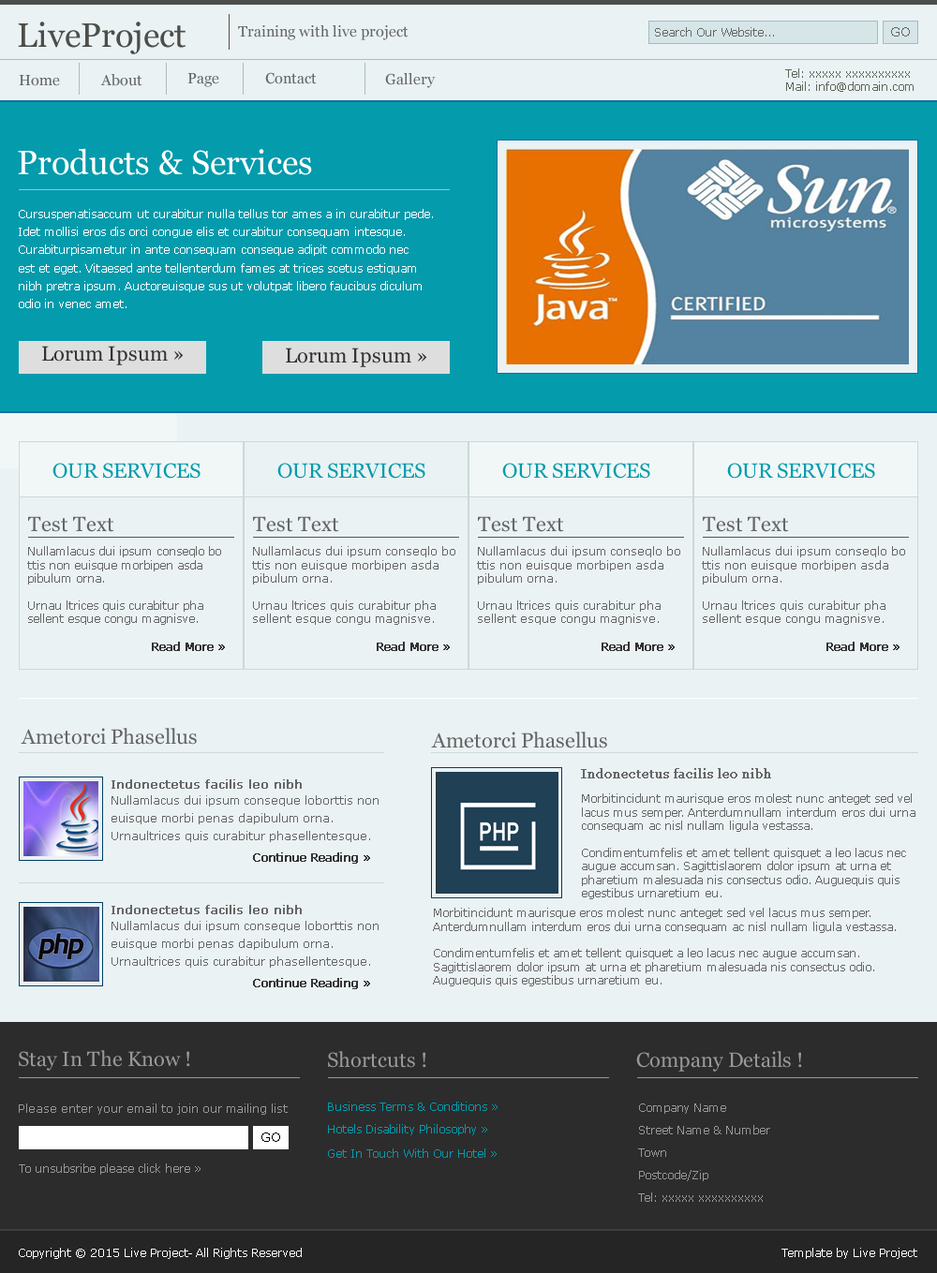
<style>
.page{position:relative;width:937px;height:1273px;background:#eaf2f4}
.page>*{position:absolute;margin:0}
.t1{font:33.7px "Georgia";color:#4d4e49}
.t2{font:15px "Georgia";color:#666666}
.t3{font:11.2px "Verdana";color:#666666}
.t4{font:13.1px "Verdana";color:#666666}
.t5{font:11.2px/13.5px "Verdana";color:#5d655a}
.t6{font:11.2px/18px "Verdana";color:#ffffff}
.t7{font:20.6px "Georgia";color:#333333}
.t8{font:20.6px "Georgia";color:#049bac}
.t9{font:20.6px "Georgia";color:#666666}
.t10{font:11.2px/13.5px "Verdana";color:#666666}
.t11{font:11.2px "Verdana";color:#333333;font-weight:bold}
.t12{font:12.2px "Georgia";color:#666666;font-weight:bold}
.t13{font:11.2px "Verdana";color:#666666;font-weight:bold}
.t14{font:11.2px/18px "Verdana";color:#666666}
.t15{font:20.6px "Georgia";color:#98989a}
.t16{font:11.2px "Verdana";color:#98989a}
.t17{font:11.2px "Verdana";color:#049bac}
.t18{font:11.2px/22.5px "Verdana";color:#98989a}
.t19{font:13.1px "Verdana";color:#000000}
.t20{font:11.2px "Verdana";color:#ffffff}
</style>
<div class="page">
<p class="t1" style="left:18px;top:22px;width:167px;height:32px">LiveProject</p>
<p class="t2" style="left:238px;top:25px;width:170px;height:15px">Training with live project</p>
<p class="t3" style="left:655px;top:27px;width:119px;height:10px">Search Our Website...</p>
<p class="t4" style="left:891px;top:27px;width:19px;height:10px">GO</p>
<p class="t2" style="left:19px;top:75px;width:41px;height:11px">Home</p>
<p class="t2" style="left:100px;top:74px;width:42px;height:12px">About</p>
<p class="t2" style="left:187px;top:73px;width:32px;height:14px">Page</p>
<p class="t2" style="left:265px;top:72px;width:52px;height:12px">Contact</p>
<p class="t2" style="left:385px;top:73px;width:51px;height:15px">Gallery</p>
<p class="t5" style="left:785px;top:68px;width:128px;height:24px">Tel: xxxxx xxxxxxxxxx<br>Mail: info@domain.com</p>
<p class="t6" style="left:19px;top:209px;width:414px;height:99px">Cursuspenatisaccum ut curabitur nulla tellus tor ames a in curabitur pede. <br>Idet mollisi eros dis orci congue elis et curabitur consequam intesque. <br>Curabiturpisametur in ante consequam conseque adipit commodo nec <br>est et eget. Vitaesed ante tellenterdum fames at trices scetus estiquam <br>nibh pretra ipsum. Auctoreuisque sus ut volutpat libero faucibus diculum <br>odio in venec amet.</p>
<p class="t7" style="left:42px;top:346px;width:141px;height:19px">Lorum Ipsum »</p>
<p class="t7" style="left:286px;top:348px;width:140px;height:19px">Lorum Ipsum »</p>
<p class="t8" style="left:52px;top:463px;width:148px;height:16px">OUR SERVICES</p>
<p class="t8" style="left:277px;top:463px;width:148px;height:16px">OUR SERVICES</p>
<p class="t8" style="left:502px;top:463px;width:148px;height:16px">OUR SERVICES</p>
<p class="t8" style="left:727px;top:463px;width:148px;height:16px">OUR SERVICES</p>
<p class="t9" style="left:28px;top:516px;width:86px;height:16px">Test Text</p>
<p class="t9" style="left:253px;top:516px;width:86px;height:16px">Test Text</p>
<p class="t9" style="left:478px;top:516px;width:86px;height:16px">Test Text</p>
<p class="t9" style="left:703px;top:516px;width:86px;height:16px">Test Text</p>
<p class="t10" style="left:27px;top:546px;width:194px;height:79px">Nullamlacus dui ipsum conseqlo bo ttis non euisque morbipen asda pibulum orna.<br><br>Urnau ltrices quis curabitur pha sellent esque congu magnisve.</p>
<p class="t10" style="left:252px;top:546px;width:203px;height:79px">Nullamlacus dui ipsum conseqlo bo ttis non euisque morbipen asda pibulum orna.<br><br>Urnau ltrices quis curabitur pha sellent esque congu magnisve.</p>
<p class="t10" style="left:477px;top:546px;width:203px;height:79px">Nullamlacus dui ipsum conseqlo bo ttis non euisque morbipen asda pibulum orna.<br><br>Urnau ltrices quis curabitur pha sellent esque congu magnisve.</p>
<p class="t10" style="left:702px;top:546px;width:203px;height:79px">Nullamlacus dui ipsum conseqlo bo ttis non euisque morbipen asda pibulum orna.<br><br>Urnau ltrices quis curabitur pha sellent esque congu magnisve.</p>
<p class="t11" style="left:152px;top:642px;width:73px;height:9px">Read More »</p>
<p class="t11" style="left:377px;top:642px;width:73px;height:9px">Read More »</p>
<p class="t11" style="left:601px;top:642px;width:73px;height:9px">Read More »</p>
<p class="t11" style="left:826px;top:642px;width:73px;height:9px">Read More »</p>
<p class="t9" style="left:21px;top:728px;width:176px;height:17px">Ametorci Phasellus</p>
<p class="t9" style="left:431px;top:732px;width:176px;height:16px">Ametorci Phasellus</p>
<p class="t12" style="left:581px;top:768px;width:190px;height:10px">Indonectetus facilis leo nibh</p>
<p class="t13" style="left:111px;top:779px;width:191px;height:10px">Indonectetus facilis leo nibh</p>
<p class="t14" style="left:111px;top:795px;width:267px;height:47px">Nullamlacus dui ipsum conseque loborttis non <br>euisque morbi penas dapibulum orna. <br>Urnaultrices quis curabitur phasellentesque.</p>
<p class="t10" style="left:582px;top:793px;width:333px;height:106px">Morbitincidunt maurisque eros molest nunc anteget sed vel lacus mus semper. Anterdumnullam interdum eros dui urna consequam ac nisl nullam ligula vestassa.<br><br>Condimentumfelis et amet tellent quisquet a leo lacus nec augue accumsan. Sagittislaorem dolor ipsum at urna et pharetium malesuada nis consectus odio. Auguequis quis egestibus urnaretium eu.</p>
<p class="t11" style="left:253px;top:852px;width:117px;height:12px">Continue Reading »</p>
<p class="t13" style="left:111px;top:905px;width:191px;height:9px">Indonectetus facilis leo nibh</p>
<p class="t10" style="left:433px;top:908px;width:462px;height:78px">Morbitincidunt maurisque eros molest nunc anteget sed vel lacus mus semper. Anterdumnullam interdum eros dui urna consequam ac nisl nullam ligula vestassa.<br><br>Condimentumfelis et amet tellent quisquet a leo lacus nec augue accumsan. Sagittislaorem dolor ipsum at urna et pharetium malesuada nis consectus odio. Auguequis quis egestibus urnaretium eu.</p>
<p class="t14" style="left:111px;top:921px;width:267px;height:47px">Nullamlacus dui ipsum conseque loborttis non <br>euisque morbi penas dapibulum orna. <br>Urnaultrices quis curabitur phasellentesque.</p>
<p class="t11" style="left:253px;top:978px;width:117px;height:11px">Continue Reading »</p>
<p class="t15" style="left:19px;top:1050px;width:171px;height:21px">Stay In The Know !</p>
<p class="t15" style="left:328px;top:1051px;width:98px;height:17px">Shortcuts !</p>
<p class="t15" style="left:636px;top:1051px;width:166px;height:21px">Company Details !</p>
<p class="t16" style="left:19px;top:1103px;width:269px;height:12px">Please enter your email to join our mailing list</p>
<p class="t17" style="left:328px;top:1102px;width:169px;height:9px">Business Terms &amp; Conditions »</p>
<p class="t18" style="left:638px;top:1103px;width:132px;height:99px">Company Name<br>Street Name &amp; Number<br>Town<br>Postcode/Zip<br>Tel: xxxxx xxxxxxxxxx</p>
<p class="t19" style="left:261px;top:1132px;width:19px;height:10px">GO</p>
<p class="t17" style="left:328px;top:1124px;width:159px;height:11px">Hotels Disability Philosophy »</p>
<p class="t17" style="left:328px;top:1148px;width:168px;height:10px">Get In Touch With Our Hotel »</p>
<p class="t16" style="left:19px;top:1163px;width:181px;height:12px">To unsubsribe please click here »</p>
<p class="t20" style="left:19px;top:1248px;width:283px;height:11px">Copyright © 2015 Live Project- All Rights Reserved</p>
<p class="t20" style="left:781px;top:1248px;width:136px;height:11px">Template by Live Project</p>
</div>
